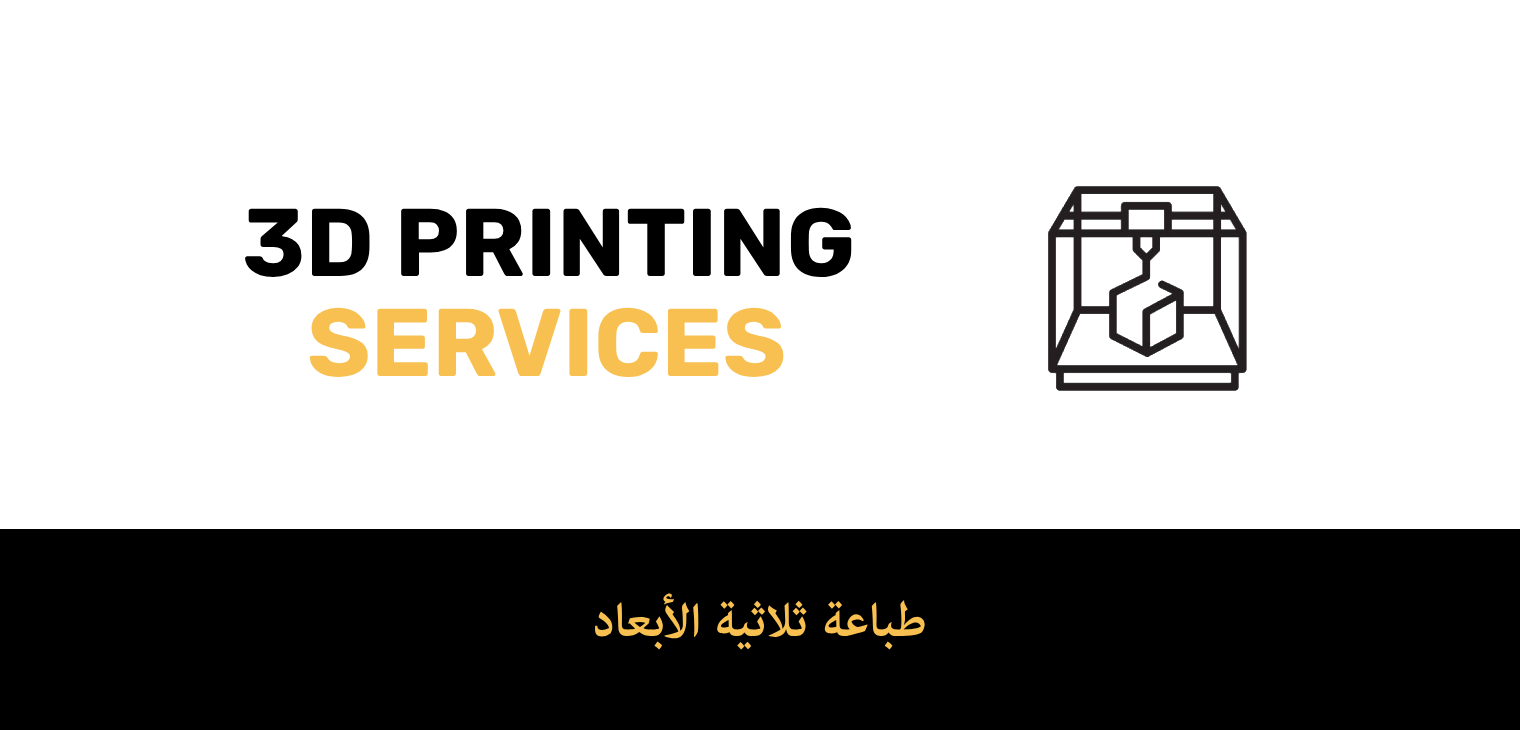
<style>
.page{position:relative;width:1520px;height:730px;background:#ffffff}
.page>*{position:absolute;margin:0}
.t1{font:96px "Rubik-Bold";color:#000000}
.t2{font:96px "Rubik-Bold";color:#f8c051}
.t3{font:67px "AdobeArabic-Bold";color:#f8c051}
</style>
<div class="page">
<p class="t1" style="left:245px;top:207px;width:607px;height:70px">3D PRINTING</p>
<p class="t2" style="left:309px;top:307px;width:475px;height:70px">SERVICES</p>
<p class="t3" style="left:595px;top:593px;width:330px;height:57px">طباعة ثلاثية الأبعاد</p>
</div>
